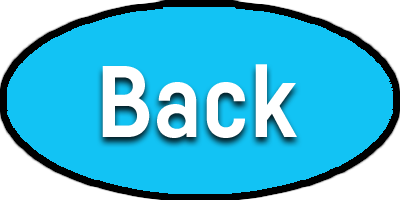
<style>
.page{position:relative;width:400px;height:200px;background:#12c3f4}
.page>*{position:absolute;margin:0}
.t1{font:100px "Fabrikat-Bold";letter-spacing:0.01em;color:#ffffff}
</style>
<div class="page">
<p class="t1" style="left:102px;top:64px;width:195px;height:74px">Back</p>
</div>
